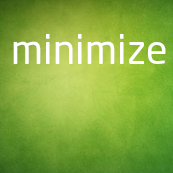
<style>
.page{position:relative;width:173px;height:173px}
.page>*{position:absolute;margin:0}
.t1{font:40px "NeoSans";color:#ffffff}
</style>
<div class="page">
<p class="t1" style="left:13px;top:34px;width:153px;height:30px">minimize</p>
</div>
